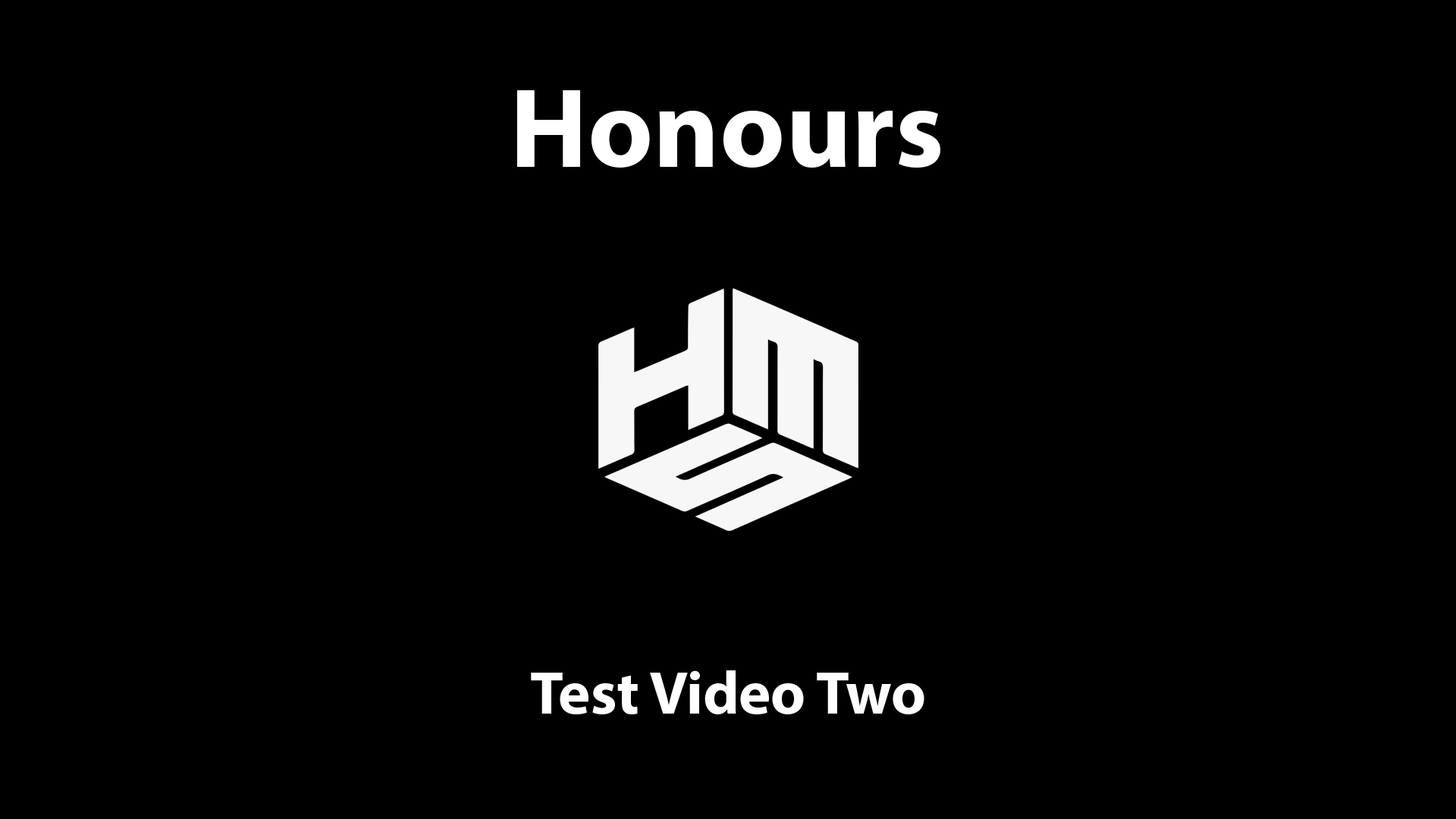
<style>
.page{position:relative;width:1456px;height:819px;background:#000000}
.page>*{position:absolute;margin:0}
.t1{font:113.7px "MyriadPro-Bold";color:#ffffff}
.t2{font:60.7px "MyriadPro-Bold";color:#ffffff}
</style>
<div class="page">
<p class="t1" style="left:517px;top:90px;width:423px;height:78px">Honours</p>
<p class="t2" style="left:531px;top:670px;width:393px;height:44px">Test Video Two</p>
</div>
